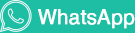
<style>
.page{position:relative;width:135px;height:33px;background:#1ebea5}
.page>*{position:absolute;margin:0}
.t1{font:20.1px "Helvetica-Regular";color:#ffffff;font-weight:bold}
</style>
<div class="page">
<p class="t1" style="left:38px;top:9px;width:97px;height:20px">WhatsApp</p>
</div>
